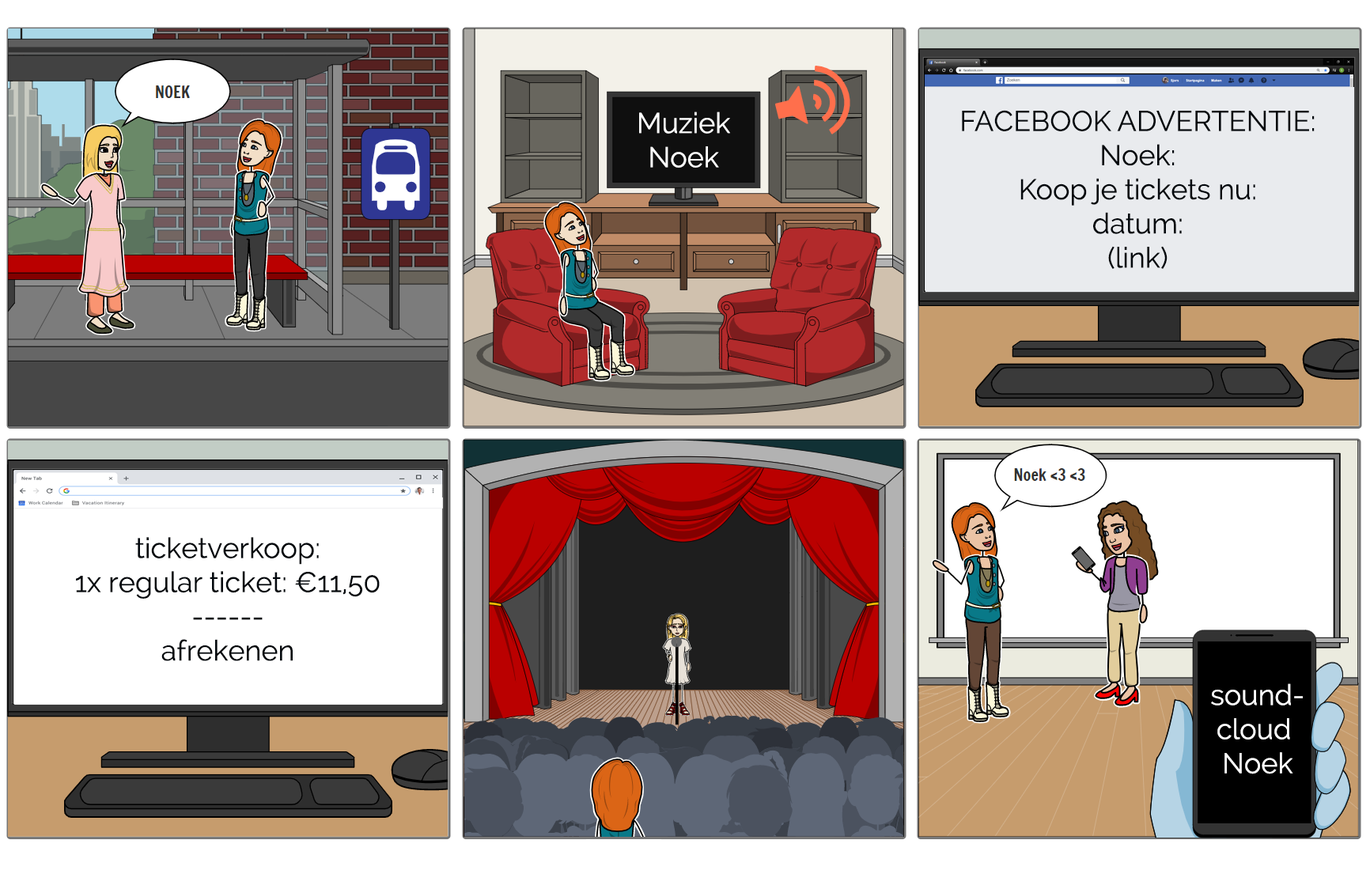
<style>
.page{position:relative;width:1370px;height:870px;background:#ffffff}
.page>*{position:absolute;margin:0}
.t1{font:28.5px "Raleway";color:#ffffff}
.t2{font:28.5px "Raleway";color:#03080d}
</style>
<div class="page">
<p class="t1" style="left:639px;top:112px;width:91px;height:56px;text-align:center">Muziek<br>Noek</p>
<p class="t2" style="left:962px;top:110px;width:353px;height:159px;text-align:center">FACEBOOK ADVERTENTIE:<br>Noek:<br>Koop je tickets nu:<br>datum:<br>(link)</p>
<p class="t2" style="left:76px;top:537px;width:304px;height:124px;text-align:center">ticketverkoop:<br>1x regular ticket: €11,50<br>------<br>afrekenen</p>
<p class="t1" style="left:1211px;top:684px;width:92px;height:91px;text-align:center">sound-<br>cloud <br>Noek</p>
</div>
